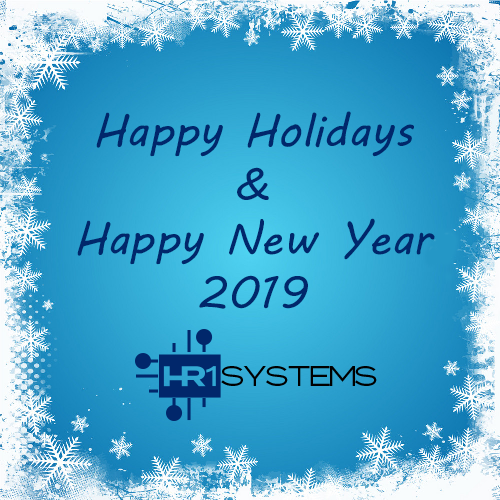
<style>
.page{position:relative;width:500px;height:500px}
.page>*{position:absolute;margin:0}
.t1{font:45px "MVBoli";color:#01276b}
</style>
<div class="page">
<p class="t1" style="left:77px;top:111px;width:358px;height:198px;text-align:center">Happy Holidays<br>&amp;<br>Happy New Year<br>2019</p>
</div>
